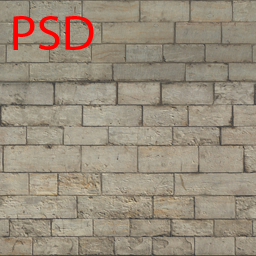
<style>
.page{position:relative;width:256px;height:256px}
.page>*{position:absolute;margin:0}
.t1{font:50px "MyriadPro-Regular";color:#ff0000}
</style>
<div class="page">
<p class="t1" style="left:13px;top:16px;width:81px;height:34px">PSD</p>
</div>
